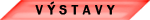
<style>
.page{position:relative;width:150px;height:20px}
.page>*{position:absolute;margin:0}
.t1{font:13px "FranklinGothic-Medium";letter-spacing:0.34em;color:#000000;text-transform:uppercase;font-weight:bold}
</style>
<div class="page">
<p class="t1" style="left:35px;top:1px;width:80px;height:14px">VÝSTAVY</p>
</div>
